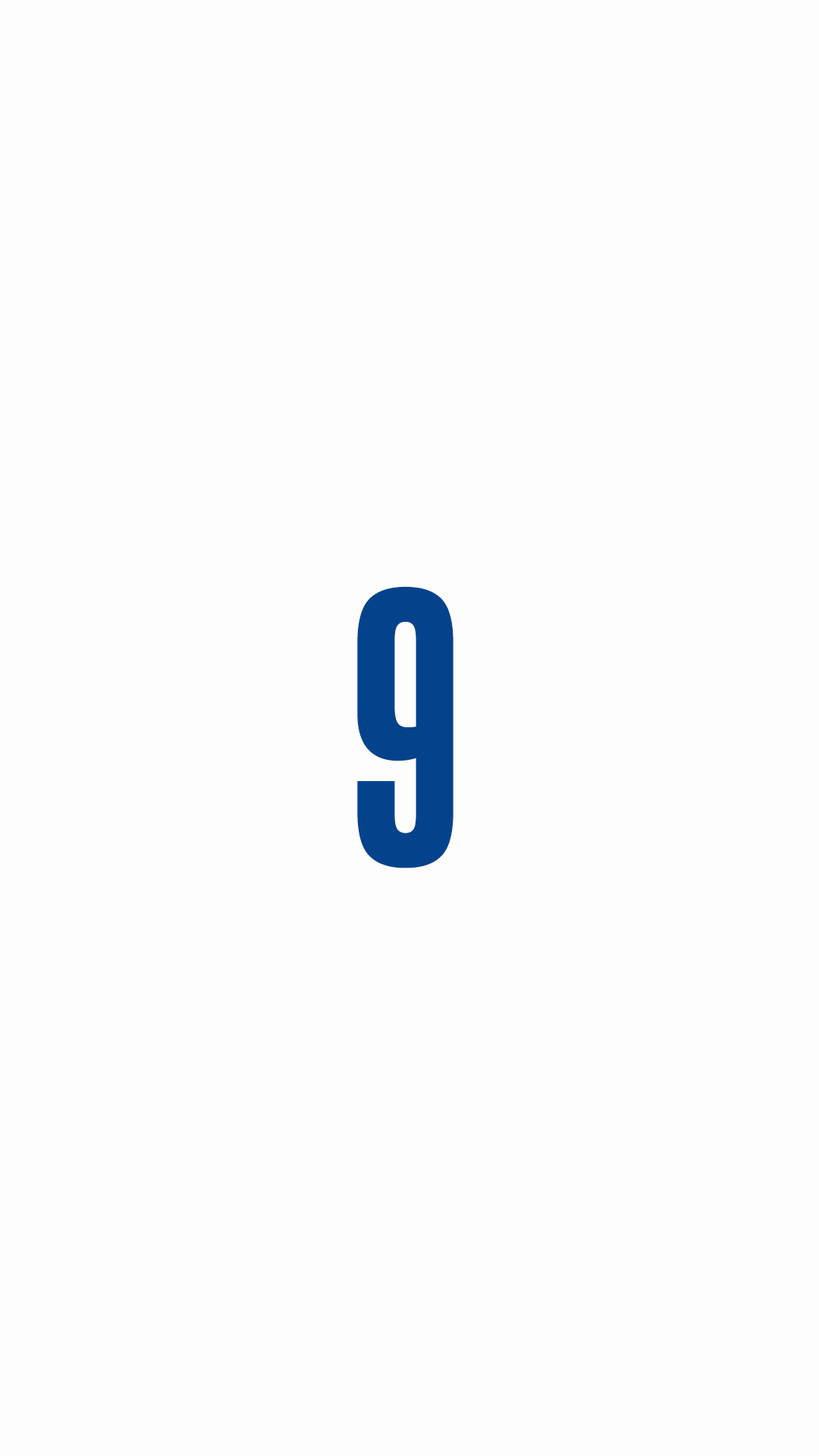
<style>
.page{position:relative;width:819px;height:1456px;background:#fefdfe}
.page>*{position:absolute;margin:0}
.t1{font:387.1px "ActionNBAApp-Bold";color:#04438c}
</style>
<div class="page">
<p class="t1" style="left:357px;top:586px;width:96px;height:282px">9</p>
</div>
